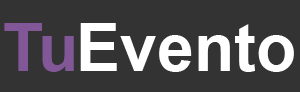
<style>
.page{position:relative;width:300px;height:92px;background:#333333}
.page>*{position:absolute;margin:0}
.t1{font:66px "Arial-BoldMT";color:#825798}
.t2{font:66px "Arial-BoldMT";color:#ffffff}
</style>
<div class="page">
<p class="t1" style="left:4px;top:23px;width:70px;height:49px">Tu</p>
<p class="t2" style="left:80px;top:23px;width:214px;height:49px">Evento</p>
</div>
